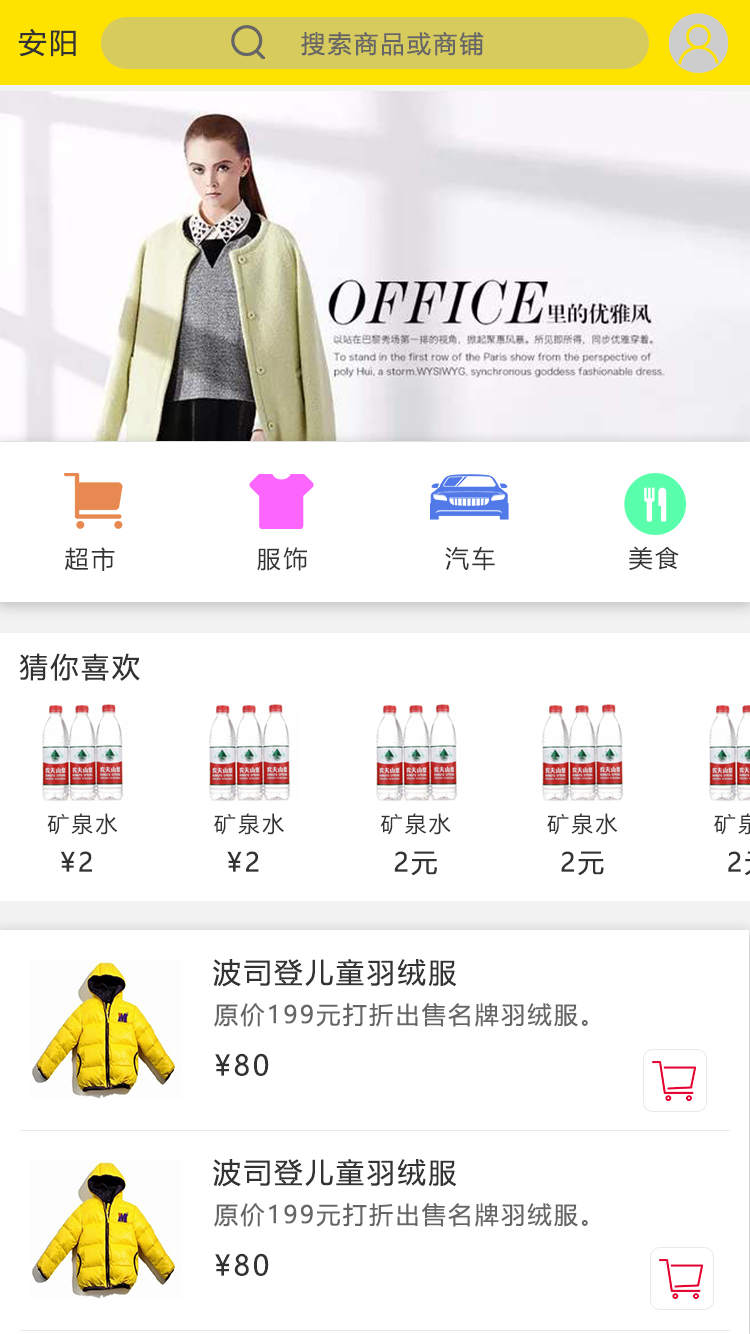
<style>
.page{position:relative;width:750px;height:1334px;background:#ffffff}
.page>*{position:absolute;margin:0}
.t1{font:28px "MicrosoftYaHei";letter-spacing:0.1em;color:#333333}
.t2{font:24px "MicrosoftYaHei";letter-spacing:0.1em;color:#666666}
.t3{font:24px "MicrosoftYaHei";letter-spacing:0.1em;color:#333333}
.t4{font:22px "MicrosoftYaHei";letter-spacing:0.1em;color:#333333}
.t5{font:26px "MicrosoftYaHei";letter-spacing:0.1em;color:#333333}
</style>
<div class="page">
<p class="t1" style="left:18px;top:28px;width:58px;height:29px">安阳</p>
<p class="t2" style="left:301px;top:32px;width:183px;height:24px">搜索商品或商铺</p>
<p class="t3" style="left:65px;top:547px;width:50px;height:24px">超市</p>
<p class="t3" style="left:257px;top:547px;width:50px;height:24px">服饰</p>
<p class="t3" style="left:445px;top:546px;width:50px;height:25px">汽车</p>
<p class="t3" style="left:629px;top:546px;width:50px;height:24px">美食</p>
<p class="t1" style="left:19px;top:653px;width:121px;height:28px">猜你喜欢</p>
<p class="t4" style="left:47px;top:813px;width:71px;height:22px">矿泉水</p>
<p class="t4" style="left:214px;top:813px;width:70px;height:22px">矿泉水</p>
<p class="t4" style="left:380px;top:813px;width:71px;height:22px">矿泉水</p>
<p class="t4" style="left:547px;top:813px;width:71px;height:22px">矿泉水</p>
<p class="t5" style="left:60px;top:851px;width:32px;height:21px">¥2</p>
<p class="t5" style="left:227px;top:851px;width:32px;height:21px">¥2</p>
<p class="t5" style="left:394px;top:851px;width:43px;height:25px">2元</p>
<p class="t5" style="left:561px;top:851px;width:43px;height:25px">2元</p>
<p class="t1" style="left:213px;top:958px;width:244px;height:29px">波司登儿童羽绒服</p>
<p class="t2" style="left:214px;top:1002px;width:374px;height:25px">原价199元打折出售名牌羽绒服。</p>
<p class="t1" style="left:215px;top:1053px;width:54px;height:23px">¥80</p>
<p class="t1" style="left:213px;top:1158px;width:244px;height:29px">波司登儿童羽绒服</p>
<p class="t2" style="left:214px;top:1202px;width:374px;height:25px">原价199元打折出售名牌羽绒服。</p>
<p class="t1" style="left:215px;top:1253px;width:54px;height:23px">¥80</p>
</div>
